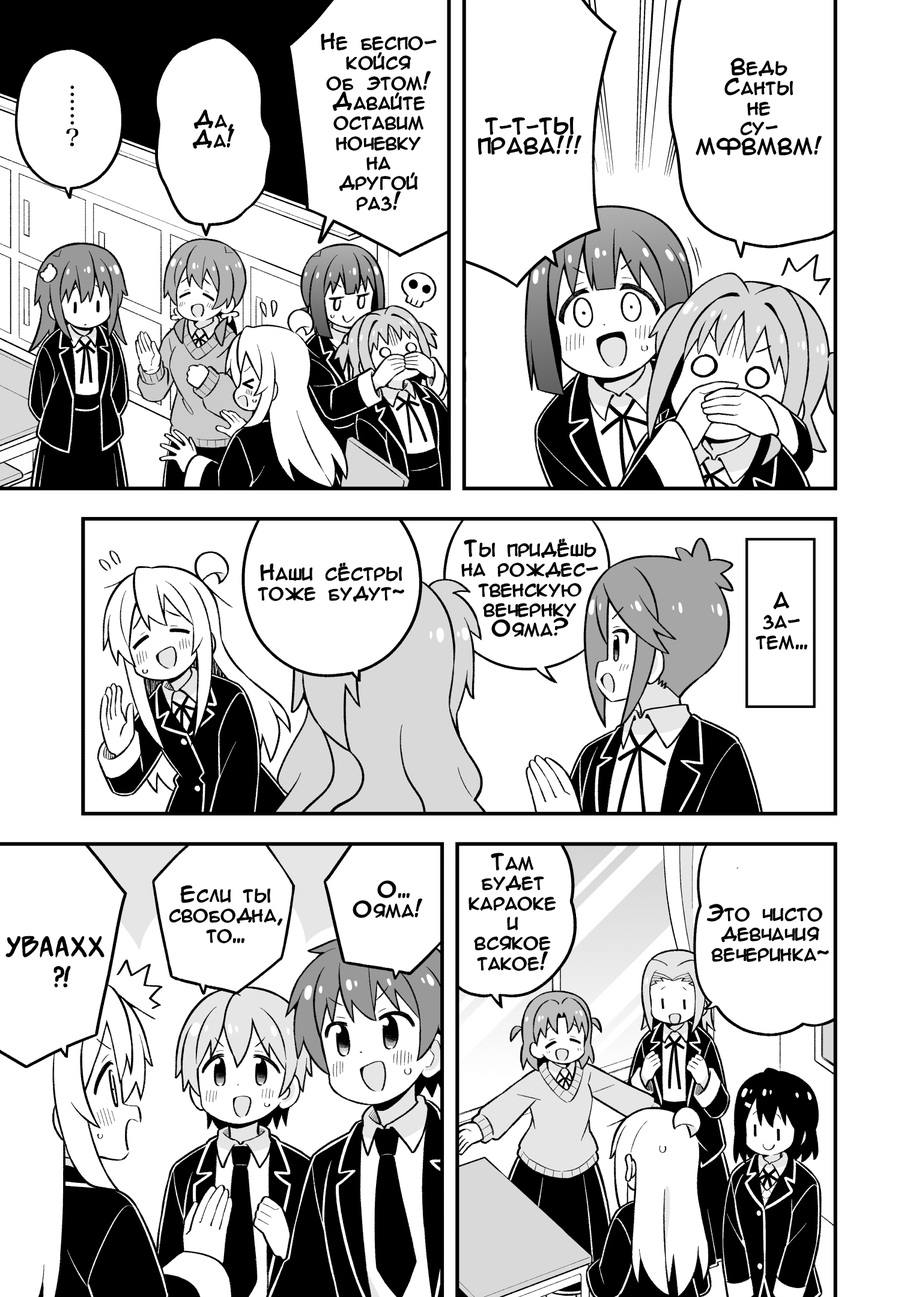
<style>
.page{position:relative;width:919px;height:1297px;background:#ffffff}
.page>*{position:absolute;margin:0}
.t1{font:20px/20px "AnimeAcev3";color:#000000}
.t2{font:30px/30px "SuperWebcomicBros.Rusbyyakustick";color:#000000}
</style>
<div class="page">
<p class="t1" style="left:321px;top:33px;width:115px;height:178px;text-align:center">Не беспо-<br>койся<br>об этом!<br>Давайте<br>оставим<br>ночевку<br>на<br>другой<br>раз!</p>
<p class="t1" style="left:696px;top:58px;width:126px;height:97px;text-align:center">Ведь<br>Санты<br>не<br>су-<br>МФВМВМ!</p>
<p class="t1" style="left:193px;top:110px;width:41px;height:38px;text-align:center">Да,<br>Да!</p>
<p class="t1" style="left:478px;top:117px;width:103px;height:37px;text-align:center">Т-Т-ТЫ<br>ПРАВА!!!</p>
<p class="t1" style="left:462px;top:539px;width:136px;height:98px;text-align:center">Ты придёшь<br>на рождес-<br>твенскую<br>вечернку<br>Ояма?</p>
<p class="t1" style="left:258px;top:563px;width:146px;height:39px;text-align:center">Наши сёстры<br>тоже будут~</p>
<p class="t1" style="left:756px;top:592px;width:51px;height:58px;text-align:center">А<br>за-<br>тем...</p>
<p class="t1" style="left:469px;top:854px;width:87px;height:117px;text-align:center">Там<br>будет<br>караоке<br>и<br>всякое<br>такое!</p>
<p class="t1" style="left:353px;top:881px;width:69px;height:37px;text-align:center">О...<br>Ояма!</p>
<p class="t1" style="left:169px;top:886px;width:113px;height:58px;text-align:center">Если ты<br>свободна,<br>то...</p>
<p class="t1" style="left:707px;top:905px;width:122px;height:57px;text-align:center">Это чисто <br>девчачия<br>вечеринка~</p>
<p class="t2" style="left:6px;top:936px;width:98px;height:52px;text-align:center">Уваахх~<br>?!</p>
</div>
